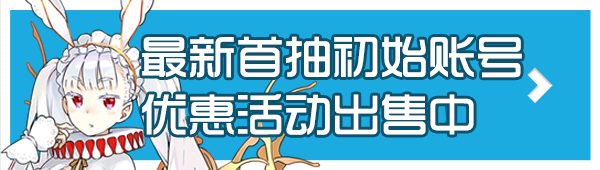
<style>
.page{position:relative;width:600px;height:170px;background:#1cabe0}
.page>*{position:absolute;margin:0}
.t1{font:48px "TRENDS";color:#ffffff}
</style>
<div class="page">
<p class="t1" style="left:142px;top:36px;width:380px;height:99px">最新首抽初始账号<br>优惠活动出售中</p>
</div>
